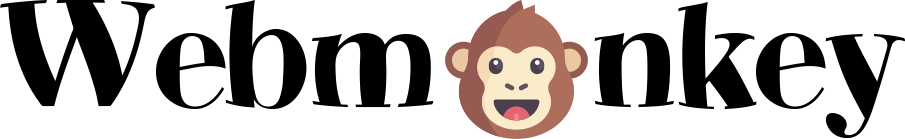
<style>
.page{position:relative;width:905px;height:139px;background:#ffffff}
.page>*{position:absolute;margin:0}
.t1{font:150px "Pelmeshka-Cyrillic";color:#000000}
</style>
<div class="page">
<p class="t1" style="left:0px;top:0px;width:905px;height:138px">Webm   nkey</p>
</div>
